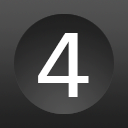
<style>
.page{position:relative;width:128px;height:128px}
.page>*{position:absolute;margin:0}
.t1{font:100px "Consolas";color:#ffffff}
</style>
<div class="page">
<p class="t1" style="left:38px;top:33px;width:51px;height:64px">4</p>
</div>
